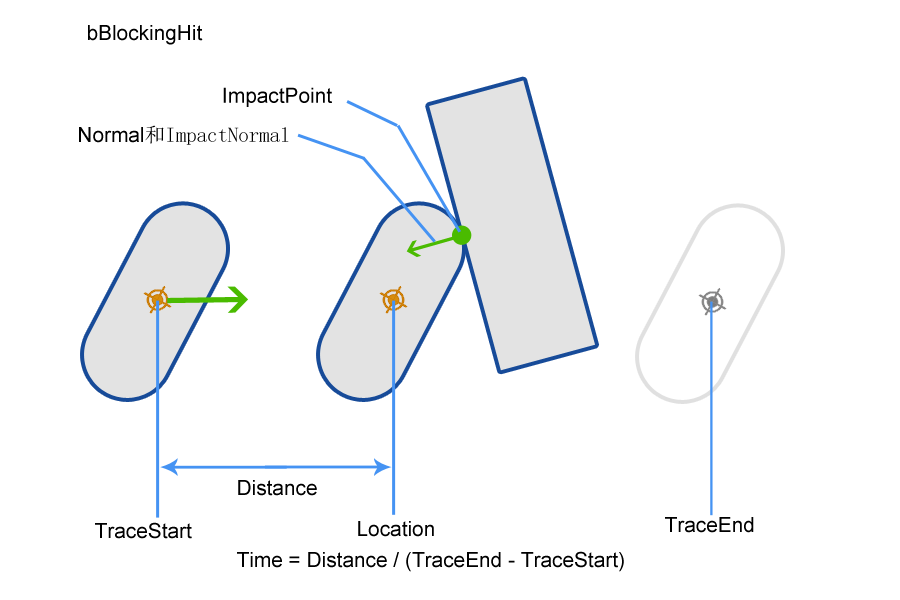
<style>
.page{position:relative;width:900px;height:600px;background:#ffffff}
.page>*{position:absolute;margin:0}
.t1{font:20.8px "ArialMT";color:#000000}
.t2{font:20.8px "SimSun";color:#000000}
</style>
<div class="page">
<p class="t1" style="left:88px;top:25px;width:115px;height:20px">bBlockingHit</p>
<p class="t1" style="left:223px;top:87px;width:109px;height:20px">ImpactPoint</p>
<p class="t2" style="left:79px;top:125px;width:210px;height:20px"><span class="t1">Normal</span>和ImpactNormal</p>
<p class="t1" style="left:238px;top:480px;width:79px;height:16px">Distance</p>
<p class="t1" style="left:358px;top:521px;width:76px;height:16px">Location</p>
<p class="t1" style="left:665px;top:517px;width:89px;height:16px">TraceEnd</p>
<p class="t1" style="left:95px;top:522px;width:97px;height:17px">TraceStart</p>
<p class="t1" style="left:237px;top:551px;width:387px;height:21px">Time = Distance / (TraceEnd - TraceStart)</p>
</div>
